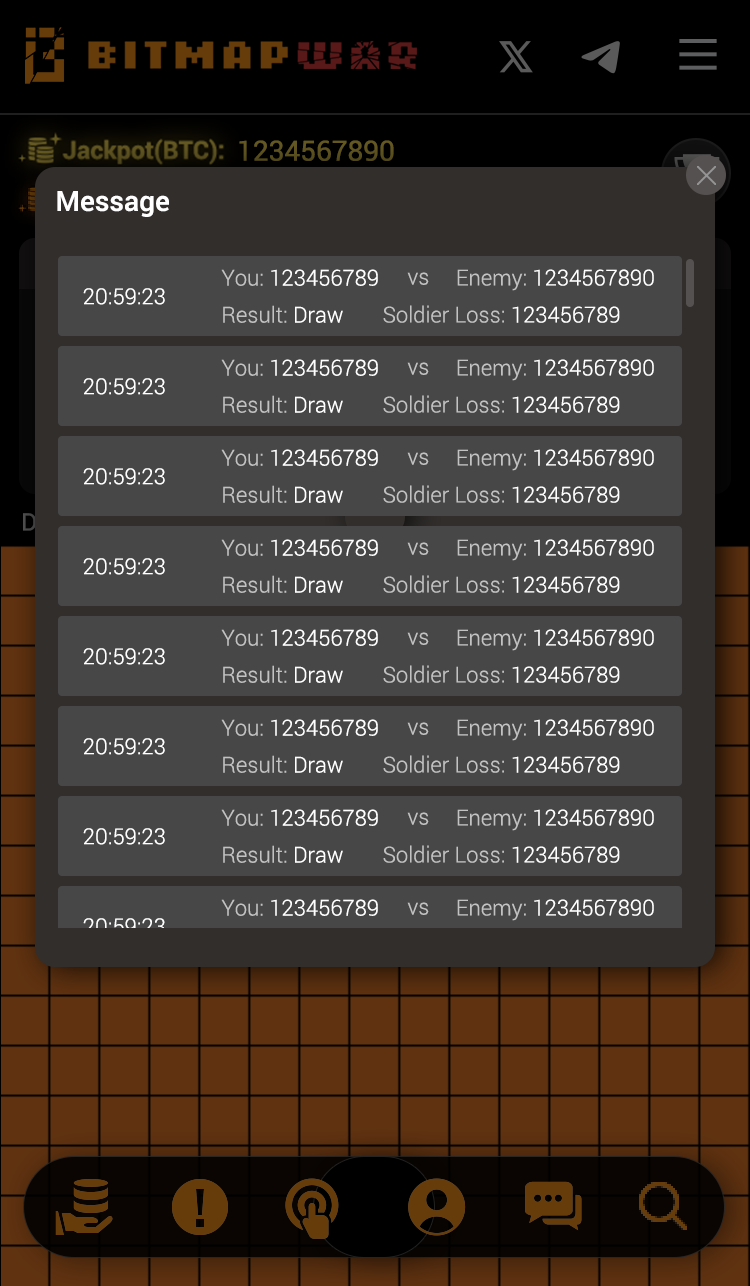
<style>
.page{position:relative;width:750px;height:1286px;background:#474747}
.page>*{position:absolute;margin:0}
.t1{font:28px "Roboto-Medium";color:#ffffff}
.t2{font:22px "Roboto-Light";color:#ffffff}
.t3{font:22px "Roboto-Light";color:#c2c2c2}
</style>
<div class="page">
<p class="t1" style="left:57px;top:191px;width:112px;height:26px">Message</p>
<p class="t2" style="left:221px;top:269px;width:157px;height:17px"><span class="t3">You: </span>123456789</p>
<p class="t2" style="left:457px;top:269px;width:197px;height:22px"><span class="t3">Enemy: </span>1234567890</p>
<p class="t3" style="left:407px;top:272px;width:22px;height:13px">vs</p>
<p class="t2" style="left:83px;top:288px;width:82px;height:17px">20:59:23</p>
<p class="t3" style="left:223px;top:305px;width:120px;height:18px">Result: <span class="t2">Draw</span></p>
<p class="t3" style="left:383px;top:305px;width:237px;height:18px">Soldier Loss: <span class="t2">123456789</span></p>
</div>
